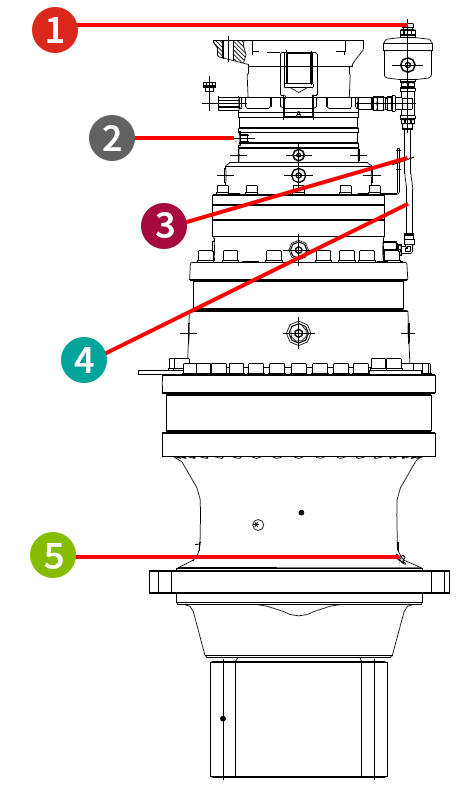
<style>
.page{position:relative;width:472px;height:807px;background:#ffffff}
.page>*{position:absolute;margin:0}
.t1{font:40px "SourceSansPro-Semibold";color:#ffffff}
</style>
<div class="page">
<p class="t1" style="left:47px;top:17px;width:16px;height:26px">1</p>
<p class="t1" style="left:103px;top:125px;width:18px;height:26px">2</p>
<p class="t1" style="left:156px;top:212px;width:18px;height:26px">3</p>
<p class="t1" style="left:74px;top:347px;width:20px;height:26px">4</p>
<p class="t1" style="left:44px;top:543px;width:19px;height:26px">5</p>
</div>
